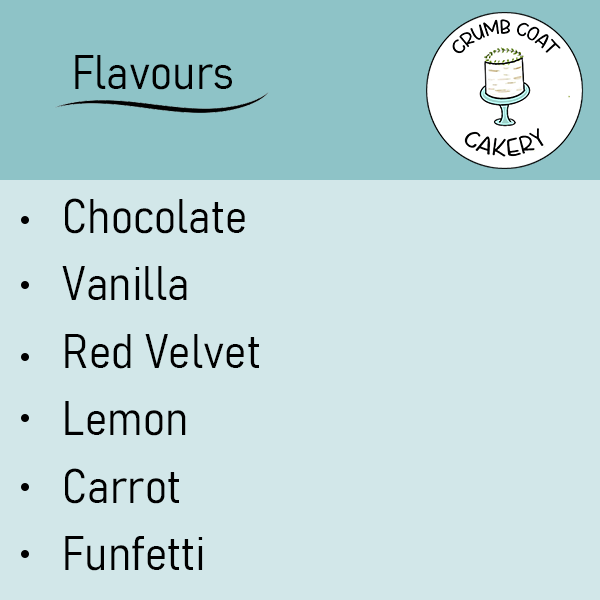
<style>
.page{position:relative;width:600px;height:600px;background:#d2e7e9}
.page>*{position:absolute;margin:0}
.t1{font:48px "Bahnschrift-LightSemiCondensed";color:#000000}
</style>
<div class="page">
<p class="t1" style="left:75px;top:55px;width:157px;height:35px">Flavours</p>
<p class="t1" style="left:62px;top:198px;width:197px;height:373px">Chocolate<br>Vanilla<br>Red Velvet<br>Lemon<br>Carrot<br>Funfetti</p>
</div>
